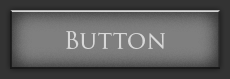
<style>
.page{position:relative;width:230px;height:79px}
.page>*{position:absolute;margin:0}
.t1{font:24px "TrajanPro3-Regular";color:#d7d7d7}
</style>
<div class="page">
<p class="t1" style="left:66px;top:31px;width:99px;height:18px">Button</p>
</div>
